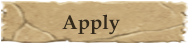
<style>
.page{position:relative;width:189px;height:44px}
.page>*{position:absolute;margin:0}
.t1{font:20px "BookAntiqua-Bold";color:#332a1c}
</style>
<div class="page">
<p class="t1" style="left:62px;top:14px;width:58px;height:21px">Apply</p>
</div>
